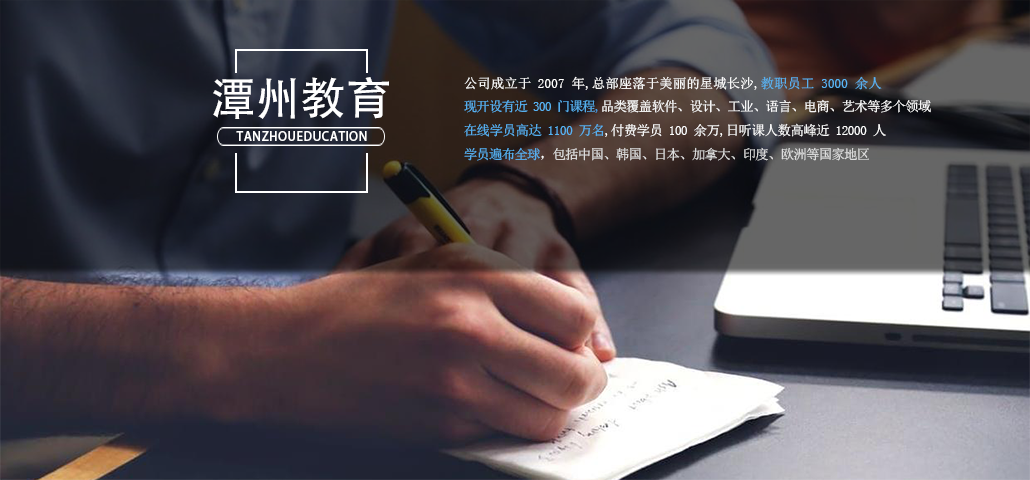
<style>
.page{position:relative;width:1030px;height:480px}
.page>*{position:absolute;margin:0}
.t1{font:45.3px "AdobeHeitiStd-Regular";color:#ffffff}
.t2{font:13.5px "SimSun";letter-spacing:-0.04em;color:#ffffff}
.t3{font:13.5px "SimSun";color:#ffffff}
.t4{font:13.5px "SimSun";color:#58b5f5}
.t5{font:13.5px "SimSun";letter-spacing:-0.06em;color:#58b5f5}
.t6{font:13.5px "SimSun";letter-spacing:-0.06em;color:#419ce6}
.t7{font:13.5px "SimSun";letter-spacing:-0.06em;color:#ffffff}
.t8{font:13.5px "SimSun";letter-spacing:-0.04em;color:#57b4f5}
.t9{font:13.5px "SimSun";letter-spacing:-0.06em;color:#57b4f5}
.t10{font:13.5px "SimSun";letter-spacing:-0.06em;color:#e4e4e4}
.t11{font:12.3px "AdobeHeitiStd-Regular";letter-spacing:0.04em;color:#ffffff}
</style>
<div class="page">
<p class="t1" style="left:213px;top:77px;width:176px;height:42px">潭州教育</p>
<p class="t2" style="left:464px;top:76px;width:467px;height:85px"><span class="t3">公司成立于 2007 年,总部座落于美丽的星城长沙,</span><span class="t4">教职员工 3000 余人<br></span><span class="t5">现开设有近 300 门课程</span><span class="t6">,</span><span class="t7">品类覆盖软件、设计、工业、语言、电商、艺术等多个领域<br></span><span class="t8">在线学员高达 1100 万名</span>,付费学员 100 余万,日听课人数高峰近 12000 人<br><span class="t9">学员遍布全球</span><span class="t7">，</span><span class="t10">包括中国、韩国、日本、加拿大、印度、欧洲等国家地区</span></p>
<p class="t11" style="left:236px;top:131px;width:131px;height:10px">TANZHOUEDUCATION</p>
</div>
